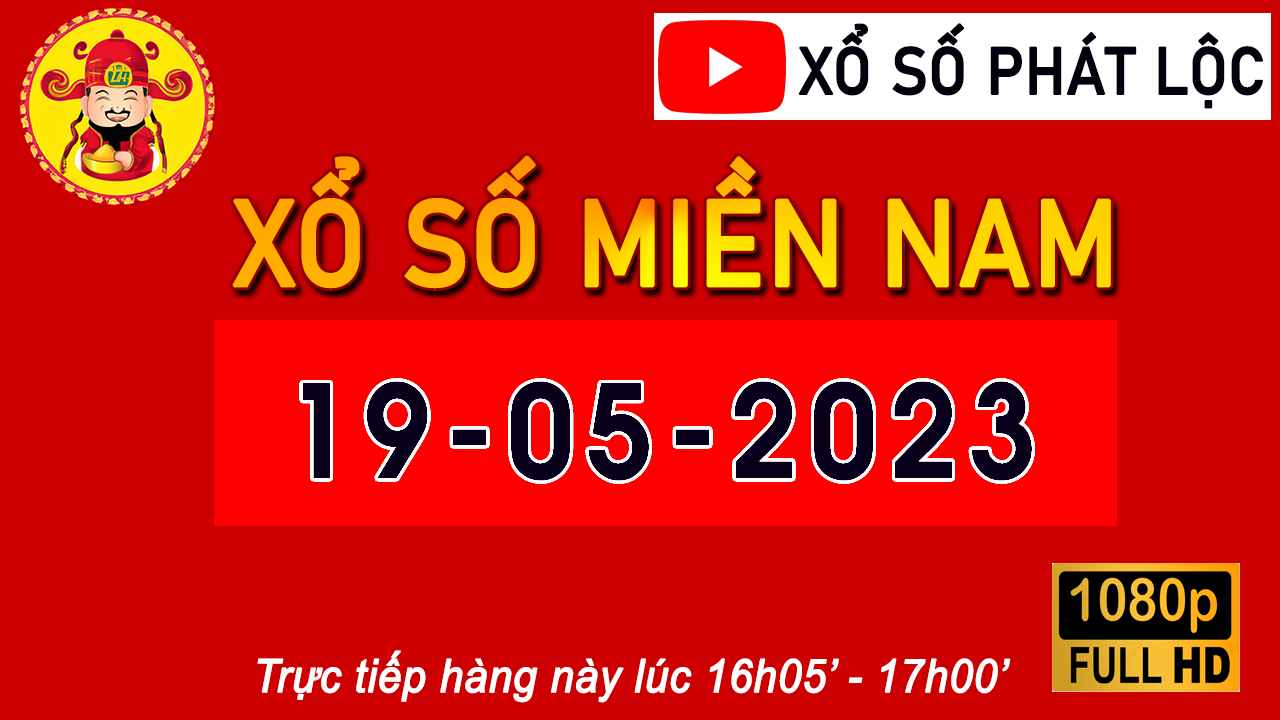
<style>
.page{position:relative;width:1280px;height:720px;background:#cc0000}
.page>*{position:absolute;margin:0}
.t1{font:65.4px "Bahnschrift";color:#04000d;text-transform:uppercase;font-weight:bold;scale:0.92 1}
.t2{font:119.9px "Bahnschrift";text-transform:uppercase;font-weight:bold;scale:0.92 1}
.t3{font:141.7px "Ancuu-Bold";letter-spacing:0.075em;color:#04000d;text-transform:uppercase;font-weight:bold;scale:0.92 1}
.t4{font:45.8px "Arial-ItalicMT";color:#ffffff;font-weight:bold;scale:0.92 1}
</style>
<div class="page">
<p class="t1" style="left:798px;top:23px;width:465px;height:86px">Xổ số phát lộc</p>
<p class="t2" style="left:232px;top:155px;width:879px;height:134px">xổ số miền nam</p>
<p class="t3" style="left:302px;top:381px;width:730px;height:100px">19-05-2023</p>
<p class="t4" style="left:257px;top:650px;width:754px;height:53px">Trực tiếp hàng này lúc 16h05’ - 17h00’</p>
</div>
